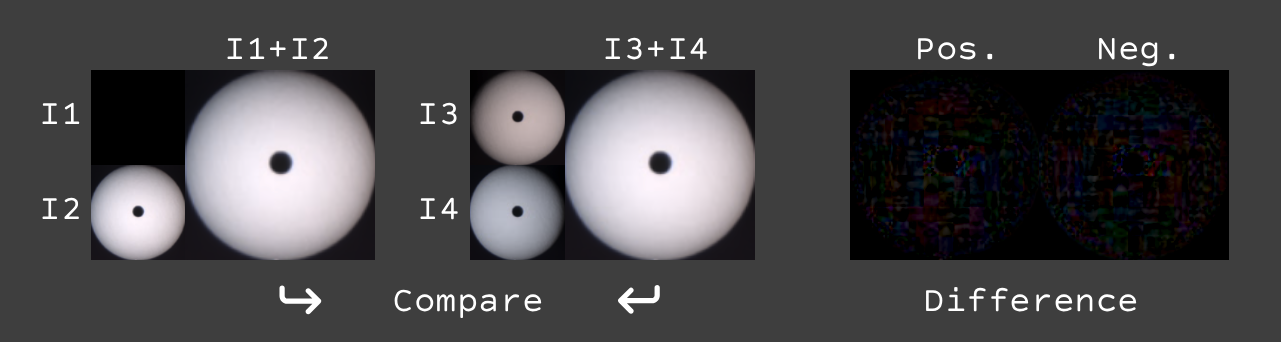
<style>
.page{position:relative;width:1281px;height:342px;background:#3e3e3e}
.page>*{position:absolute;margin:0}
.t1{font:36px "CourierPrimeCode-Regular";color:#ffffff}
</style>
<div class="page">
<p class="t1" style="left:227px;top:37px;width:101px;height:22px">I1+I2</p>
<p class="t1" style="left:605px;top:37px;width:102px;height:23px">I3+I4</p>
<p class="t1" style="left:918px;top:38px;width:75px;height:22px">Pos.</p>
<p class="t1" style="left:1099px;top:37px;width:76px;height:30px">Neg.</p>
<p class="t1" style="left:42px;top:102px;width:38px;height:22px">I1</p>
<p class="t1" style="left:420px;top:102px;width:37px;height:23px">I3</p>
<p class="t1" style="left:42px;top:197px;width:37px;height:22px">I2</p>
<p class="t1" style="left:420px;top:197px;width:38px;height:23px">I4</p>
<p class="t1" style="left:394px;top:289px;width:148px;height:29px">Compare</p>
<p class="t1" style="left:926px;top:287px;width:211px;height:25px">Difference</p>
</div>
